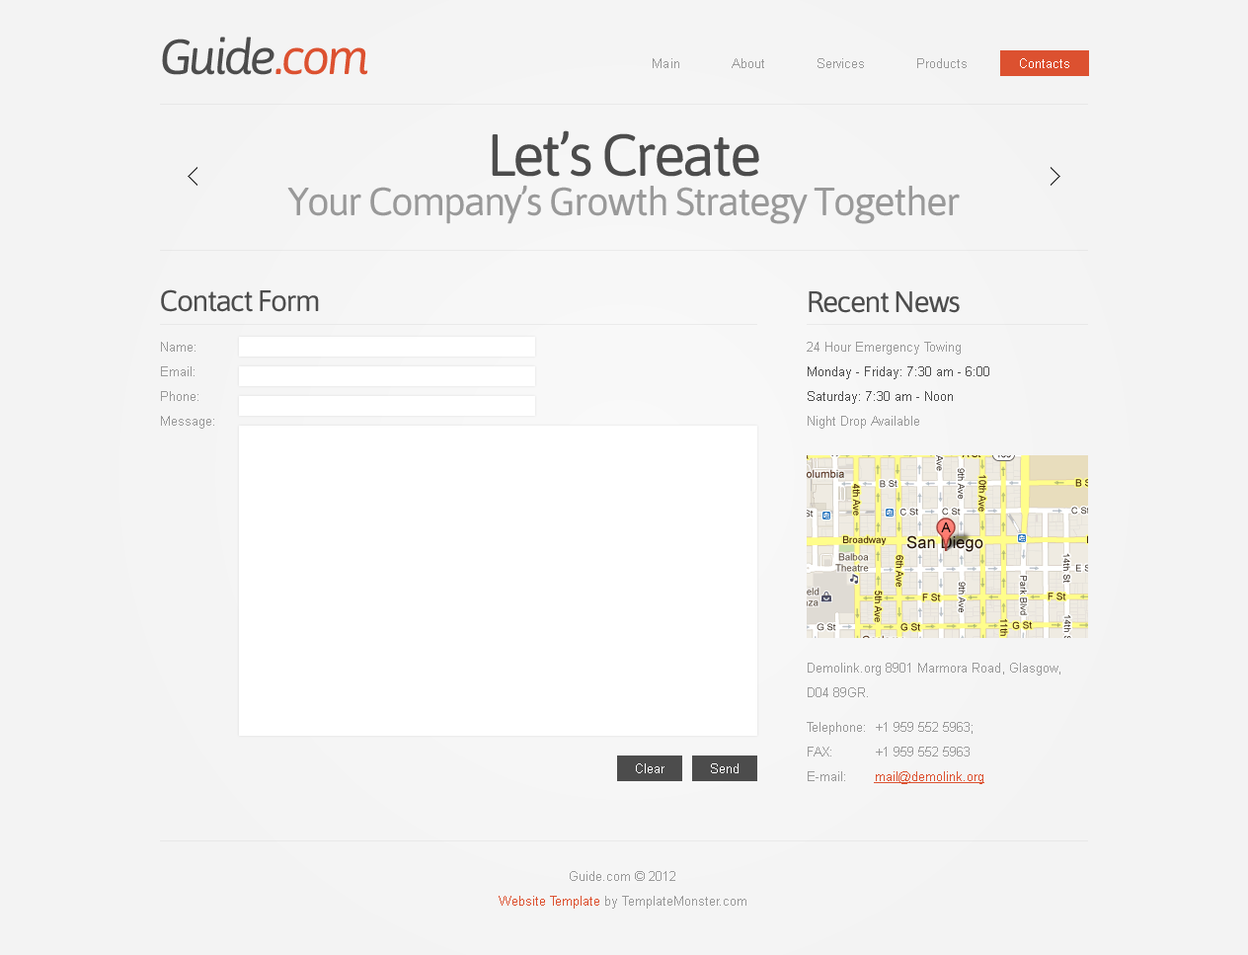
<style>
.page{position:relative;width:1248px;height:955px;background:#f3f3f3}
.page>*{position:absolute;margin:0}
.t1{font:49.4px "Asap-Italic";letter-spacing:-0.05em;color:#4c4c4c}
.t2{font:49.4px "Asap-Italic";letter-spacing:-0.1em;color:#4c4c4c}
.t3{font:49.4px "Asap-Italic";letter-spacing:-0.05em;color:#dc5130}
.t4{font:12.8px "ArialMT";color:#999999}
.t5{font:39.5px/39.5px "Asap-Regular";letter-spacing:-0.05em;color:#999999}
.t6{font:59.3px/39.5px "Asap-Regular";letter-spacing:-0.05em;color:#4c4c4c}
.t7{font:29.6px "Asap-Regular";letter-spacing:-0.05em;color:#4c4c4c}
.t8{font:12.8px/24.7px "ArialMT";color:#999999}
.t9{font:12.8px/24.7px "ArialMT";color:#4c4c4c}
.t10{font:12.8px/34.6px "ArialMT";color:#999999}
.t11{font:12.8px/24.7px "ArialMT";color:#dc5130;text-decoration:underline}
.t12{font:12.8px "ArialMT";color:#ffffff}
.t13{font:12.8px/24.7px "ArialMT";color:#dc5130}
</style>
<div class="page">
<p class="t1" style="left:162px;top:37px;width:206px;height:38px"><span class="t2">G</span>uide<span class="t3">.com</span></p>
<p class="t4" style="left:653px;top:58px;width:417px;height:10px">Main             About             Services             Products             Contacts</p>
<p class="t4" style="left:653px;top:58px;width:417px;height:10px">Main             About             Services             Products             Contacts</p>
<p class="t5" style="left:287px;top:130px;width:673px;height:94px;text-align:center"><span class="t6">Let’s Create<br></span>Your Company’s Growth Strategy Together</p>
<p class="t7" style="left:161px;top:289px;width:158px;height:23px">Contact Form</p>
<p class="t7" style="left:809px;top:291px;width:151px;height:22px">Recent News</p>
<p class="t8" style="left:161px;top:342px;width:53px;height:87px">Name:<br>Email:<br>Phone:<br>Message:</p>
<p class="t8" style="left:807px;top:342px;width:254px;height:442px">24 Hour Emergency Towing<br><span class="t9">Monday - Friday: 7:30 am - 6:00<br>Saturday: 7:30 am - Noon<br></span>Night Drop Available<br><br><br><br><br><br><br><br><br><br>Demolink.org 8901 Marmora Road, Glasgow, D04 89GR.<br><span class="t10">Telephone:  +1 959 552 5963;<br></span>FAX:           +1 959 552 5963<br>E-mail:       <span class="t11">mail@demolink.org</span></p>
<p class="t12" style="left:636px;top:764px;width:29px;height:9px">Clear</p>
<p class="t12" style="left:711px;top:764px;width:28px;height:9px">Send</p>
<p class="t8" style="left:499px;top:871px;width:248px;height:38px;text-align:center">Guide.com © 2012 <br><span class="t13">Website Template</span> by TemplateMonster.com</p>
</div>
